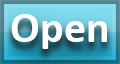
<style>
.page{position:relative;width:120px;height:64px}
.page>*{position:absolute;margin:0}
.t1{font:44.4px "Calibri-Bold";color:#ffffff}
</style>
<div class="page">
<p class="t1" style="left:11px;top:14px;width:96px;height:35px">Open</p>
</div>
